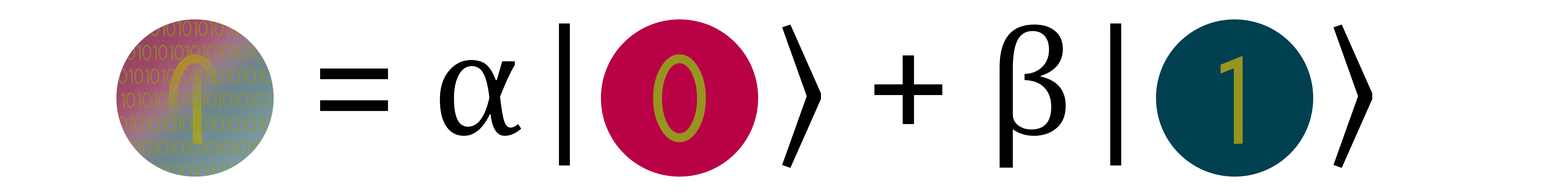
<style>
.page{position:relative;width:1568px;height:196px;background:#ffffff}
.page>*{position:absolute;margin:0}
.t1{font:156.8px "Cambria";color:#000000}
.t2{font:156.8px "SitkaSmall-Italic";color:#000000}
.t3{font:89.8px "EleganTech";color:#979520}
</style>
<div class="page">
<p class="t1" style="left:320px;top:23px;width:1052px;height:145px">= α<span class="t2">|</span>     ⟩ + β<span class="t2">|</span>     ⟩</p>
<p class="t3" style="left:653px;top:54px;width:53px;height:88px">0</p>
<p class="t3" style="left:1220px;top:56px;width:23px;height:88px">1</p>
</div>
